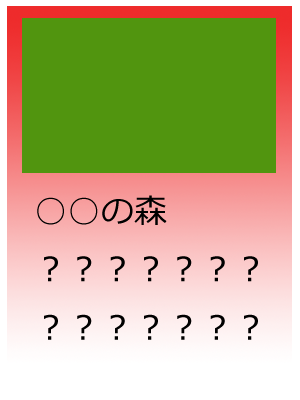
<style>
.page{position:relative;width:300px;height:400px;background:#51950f}
.page>*{position:absolute;margin:0}
.t1{font:33.3px "Meiryo";color:#000000}
</style>
<div class="page">
<p class="t1" style="left:37px;top:195px;width:221px;height:145px">○○の森<br>？？？？？？？<br>？？？？？？？</p>
</div>
